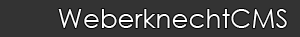
<style>
.page{position:relative;width:300px;height:37px;background:#333333}
.page>*{position:absolute;margin:0}
.t1{font:26.1px "CenturyGothic";color:#ffffff}
</style>
<div class="page">
<p class="t1" style="left:58px;top:9px;width:229px;height:19px">WeberknechtCMS</p>
</div>
